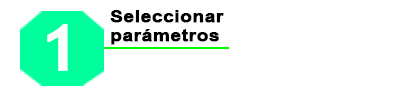
<style>
.page{position:relative;width:400px;height:100px;background:#ffffff}
.page>*{position:absolute;margin:0}
.t1{font:15.6px "Arial-BoldMT";color:#000000;font-weight:bold;scale:1.23 1}
.t2{font:64.5px "TrebuchetMS";color:#ffffff;font-weight:bold;scale:1.16 1}
</style>
<div class="page">
<p class="t1" style="left:110px;top:10px;width:114px;height:35px">Seleccionar<br>parámetros</p>
<p class="t2" style="left:47px;top:24px;width:21px;height:47px">1</p>
</div>
